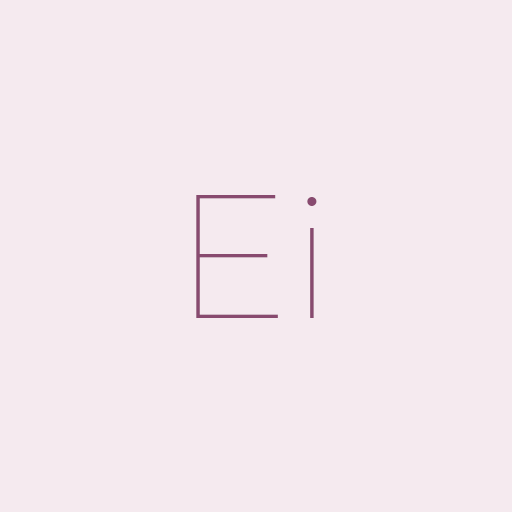
<style>
.page{position:relative;width:512px;height:512px;background:#f5eaef}
.page>*{position:absolute;margin:0}
.t1{font:175px "Montserrat-Thin";color:#884a6f}
</style>
<div class="page">
<p class="t1" style="left:196px;top:195px;width:121px;height:123px">Ei</p>
</div>
